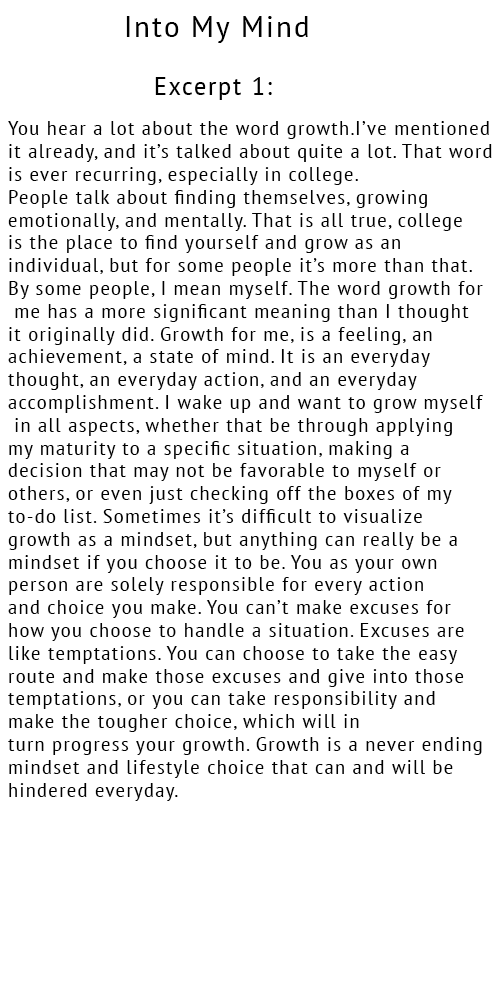
<style>
.page{position:relative;width:500px;height:1000px;background:#ffffff}
.page>*{position:absolute;margin:0}
.t1{font:30px "PTSans-Narrow";letter-spacing:0.06em;color:#000000;scale:1.2 1}
.t2{font:25px "PTSans-Narrow";letter-spacing:0.06em;color:#000000;scale:1.2 1}
.t3{font:19px "PTSans-Narrow";letter-spacing:0.06em;color:#000000;scale:1.2 1}
</style>
<div class="page">
<p class="t1" style="left:126px;top:16px;width:182px;height:27px">Into My Mind</p>
<p class="t2" style="left:155px;top:77px;width:117px;height:23px">Excerpt 1:</p>
<p class="t3" style="left:8px;top:121px;width:484px;height:680px">You hear a lot about the word growth.I’ve mentioned <br>it already, and it’s talked about quite a lot. That word <br>is ever recurring, especially in college. <br>People talk about finding themselves, growing <br>emotionally, and mentally. That is all true, college <br>is the place to find yourself and grow as an <br>individual, but for some people it’s more than that. <br>By some people, I mean myself. The word growth for<br> me has a more significant meaning than I thought <br>it originally did. Growth for me, is a feeling, an <br>achievement, a state of mind. It is an everyday <br>thought, an everyday action, and an everyday <br>accomplishment. I wake up and want to grow myself<br> in all aspects, whether that be through applying <br>my maturity to a specific situation, making a <br>decision that may not be favorable to myself or <br>others, or even just checking off the boxes of my <br>to-do list. Sometimes it’s difficult to visualize <br>growth as a mindset, but anything can really be a <br>mindset if you choose it to be. You as your own <br>person are solely responsible for every action <br>and choice you make. You can’t make excuses for <br>how you choose to handle a situation. Excuses are <br>like temptations. You can choose to take the easy <br>route and make those excuses and give into those <br>temptations, or you can take responsibility and <br>make the tougher choice, which will in <br>turn progress your growth. Growth is a never ending <br>mindset and lifestyle choice that can and will be <br>hindered everyday.</p>
</div>
